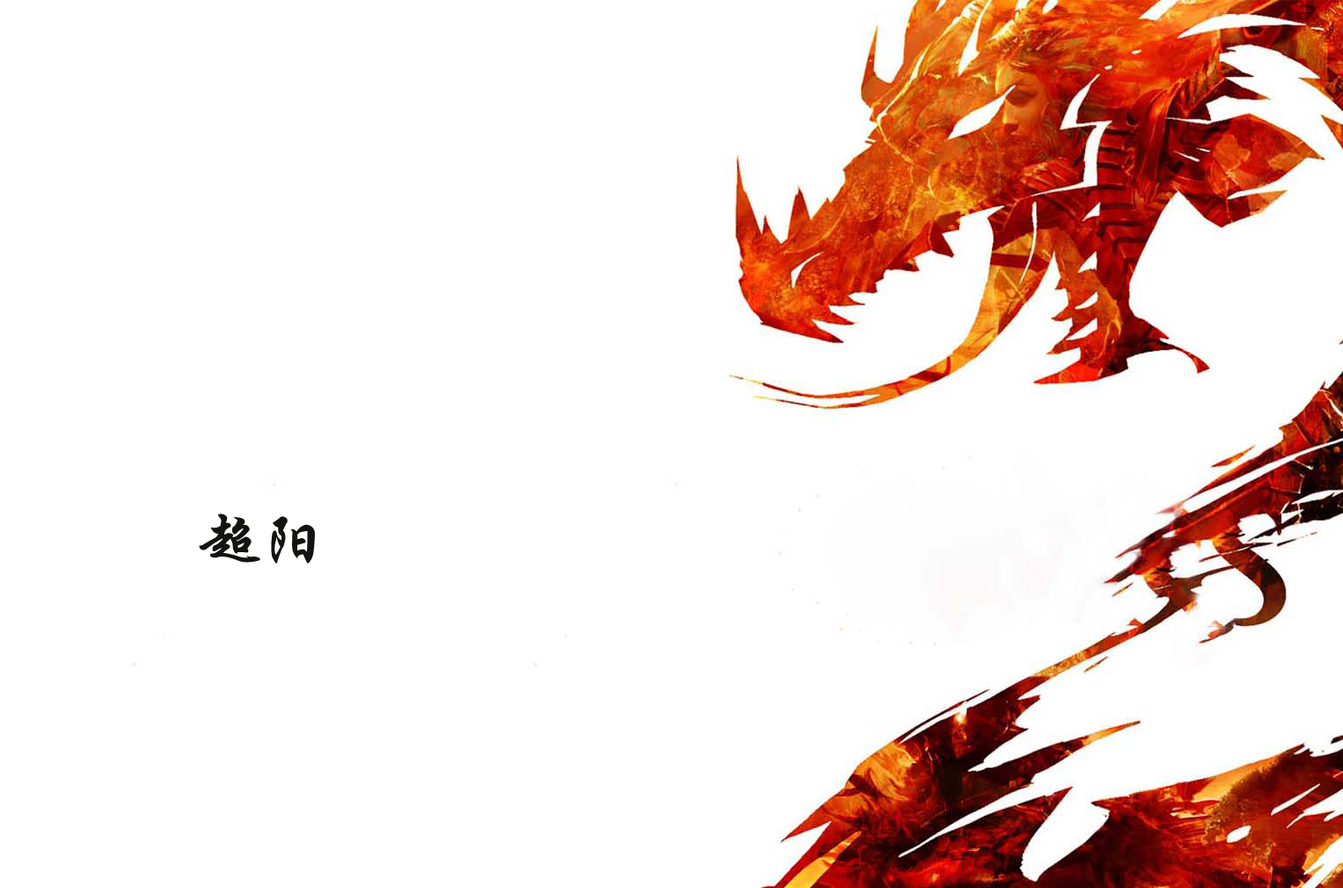
<style>
.page{position:relative;width:1343px;height:888px;background:#ffffff}
.page>*{position:absolute;margin:0}
.t1{font:63.3px "STXingkai";color:#131310}
</style>
<div class="page">
<p class="t1" style="left:199px;top:514px;width:116px;height:50px">超阳</p>
</div>
